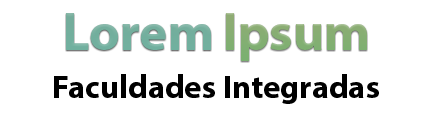
<style>
.page{position:relative;width:433px;height:114px;background:#ffffff}
.page>*{position:absolute;margin:0}
.t1{font:53.3px "MyriadPro-Bold";color:#73af9e}
.t2{font:53.3px "MyriadPro-Bold";color:#86ae73}
.t3{font:32.8px "MyriadPro-Bold";color:#000000}
</style>
<div class="page">
<p class="t1" style="left:66px;top:13px;width:145px;height:37px">Lorem</p>
<p class="t2" style="left:226px;top:13px;width:141px;height:48px">Ipsum</p>
<p class="t3" style="left:54px;top:74px;width:325px;height:30px">Faculdades Integradas</p>
</div>
